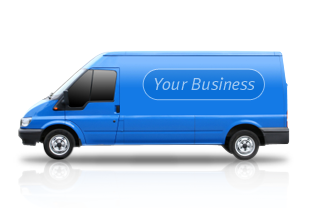
<style>
.page{position:relative;width:314px;height:208px;background:#ffffff}
.page>*{position:absolute;margin:0}
.t1{font:17.4px "MetaNormalLF-Italic";color:#9fc7f0}
</style>
<div class="page">
<p class="t1" style="left:154px;top:77px;width:101px;height:13px">Your Business</p>
</div>
